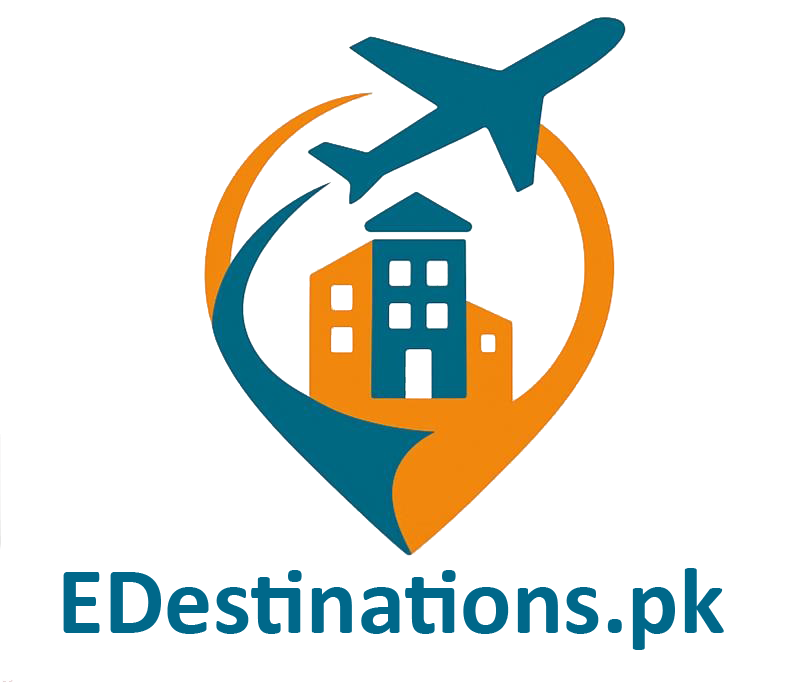
<style>
.page{position:relative;width:787px;height:692px;background:#ffffff}
.page>*{position:absolute;margin:0}
.t1{font:96px "Calibri-Bold";color:#00688a}
</style>
<div class="page">
<p class="t1" style="left:63px;top:568px;width:661px;height:82px">EDestinations.pk</p>
</div>
